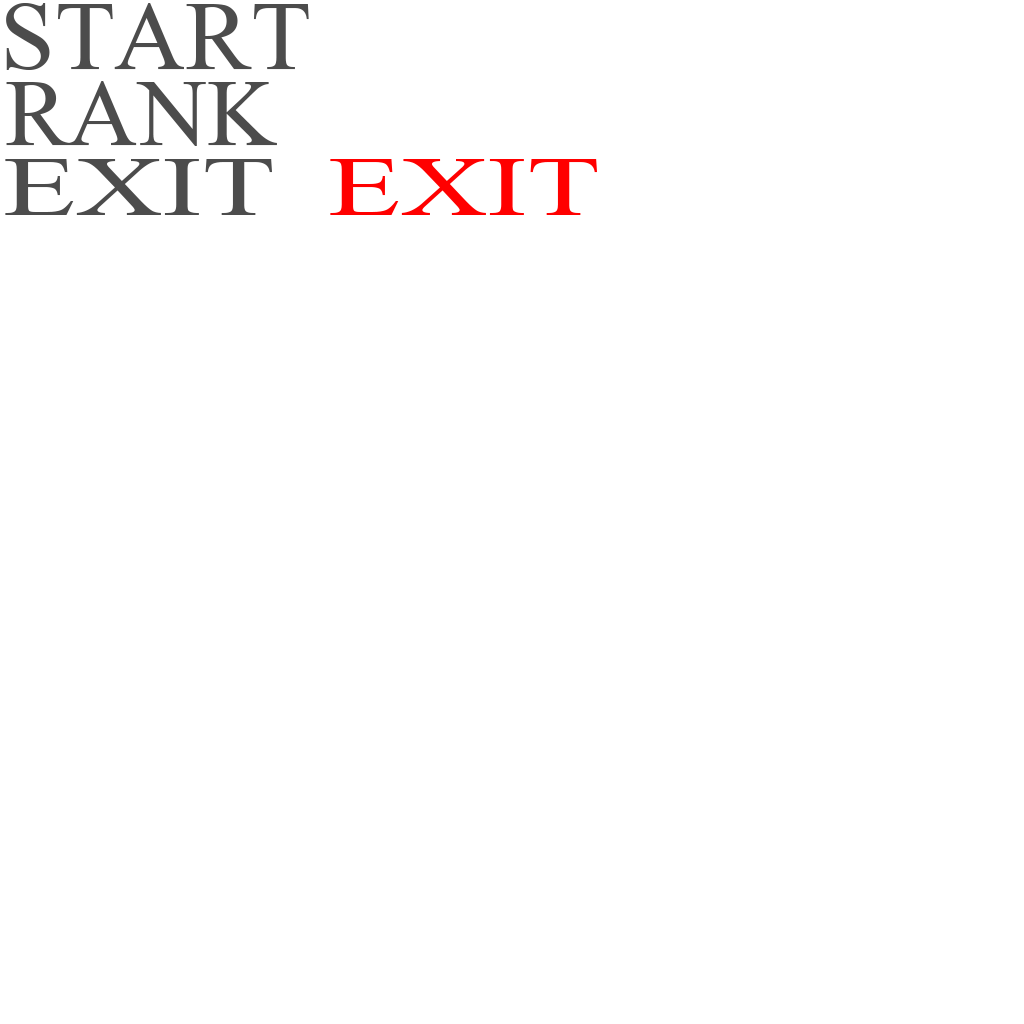
<style>
.page{position:relative;width:1024px;height:1024px;background:#ffffff}
.page>*{position:absolute;margin:0}
.t1{font:148.8px "AngsanaNew";color:#4c4c4c}
.t2{font:145.2px "AngsanaNew";color:#4c4c4c}
.t3{font:127.4px "AngsanaNew";color:#4c4c4c;scale:1.42 1}
.t4{font:127.4px "AngsanaNew";color:#ff0000;scale:1.42 1}
</style>
<div class="page">
<p class="t1" style="left:6px;top:3px;width:303px;height:67px">START</p>
<p class="t2" style="left:6px;top:81px;width:271px;height:65px">RANK</p>
<p class="t3" style="left:5px;top:159px;width:267px;height:56px">EXIT</p>
<p class="t4" style="left:330px;top:159px;width:267px;height:56px">EXIT</p>
</div>
